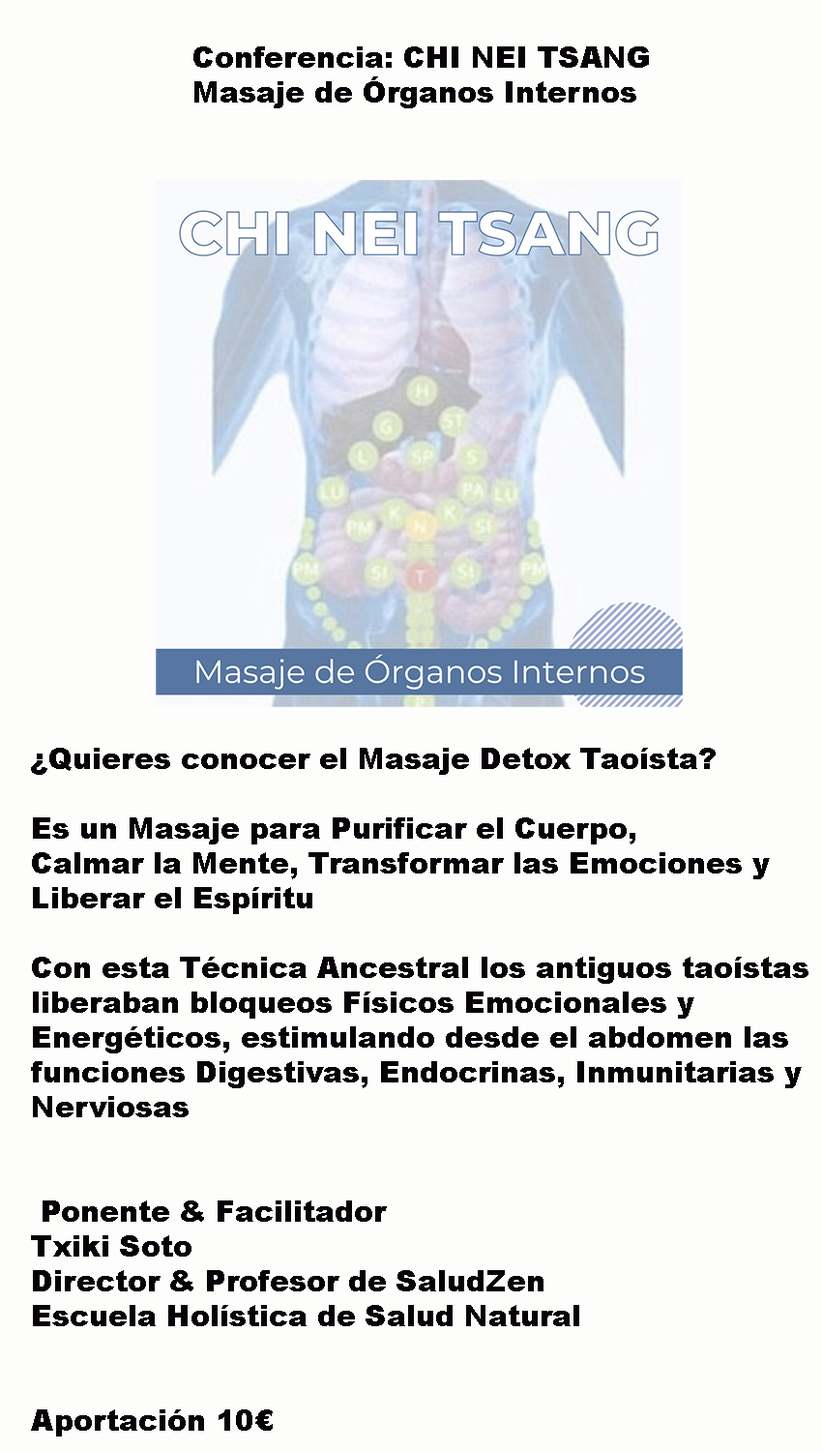
<style>
.page{position:relative;width:822px;height:1451px;background:#fdfdfc}
.page>*{position:absolute;margin:0}
.t1{font:29px "Arial-Black";color:#070207}
.t2{font:8.7px "Arial-Black";color:#070207}
</style>
<div class="page">
<p class="t1" style="left:193px;top:46px;width:456px;height:62px">Conferencia: CHI NEI TSANG <br>Masaje de Órganos Internos</p>
<p class="t1" style="left:31px;top:748px;width:777px;height:688px"><span class="t2"><br><br></span><br><br><br><br><br><br>¿Quieres conocer el Masaje Detox Taoísta?<br><br>Es un Masaje para Purificar el Cuerpo, <br>Calmar la Mente, Transformar las Emociones y <br>Liberar el Espíritu <br><br>Con esta Técnica Ancestral los antiguos taoístas <br>liberaban bloqueos Físicos Emocionales y <br>Energéticos, estimulando desde el abdomen las <br>funciones Digestivas, Endocrinas, Inmunitarias y <br>Nerviosas<br><br><br> Ponente &amp; Facilitador <br>Txiki Soto<br>Director &amp; Profesor de SaludZen<br>Escuela Holística de Salud Natural<br><br><br>Aportación 10€</p>
</div>
